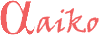
<style>
.page{position:relative;width:99px;height:35px;background:#ffffff}
.page>*{position:absolute;margin:0}
.t1{font:30px "VinerHandITC";color:#f16060}
</style>
<div class="page">
<p class="t1" style="left:36px;top:8px;width:63px;height:26px">aiko</p>
</div>
